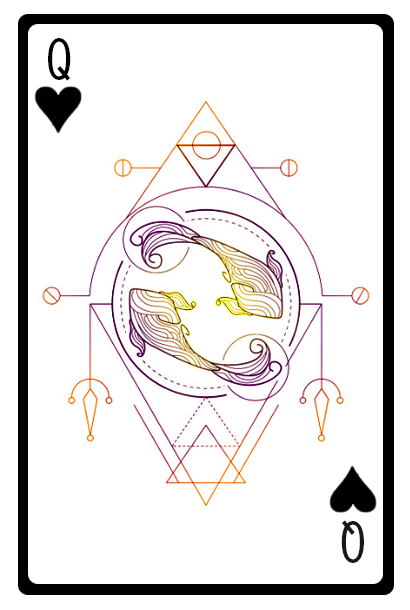
<style>
.page{position:relative;width:410px;height:610px;background:#ffffff}
.page>*{position:absolute;margin:0}
.t1{font:60px "OratorStd";letter-spacing:0.1em;color:#000000}
.t2{font:60.3px "OratorStd";letter-spacing:0.1em;color:#1d1616}
</style>
<div class="page">
<p class="t1" style="left:48px;top:38px;width:23px;height:43px">Q</p>
<p class="t2" style="left:341px;top:520px;width:23px;height:43px;rotate:180deg">Q</p>
</div>
